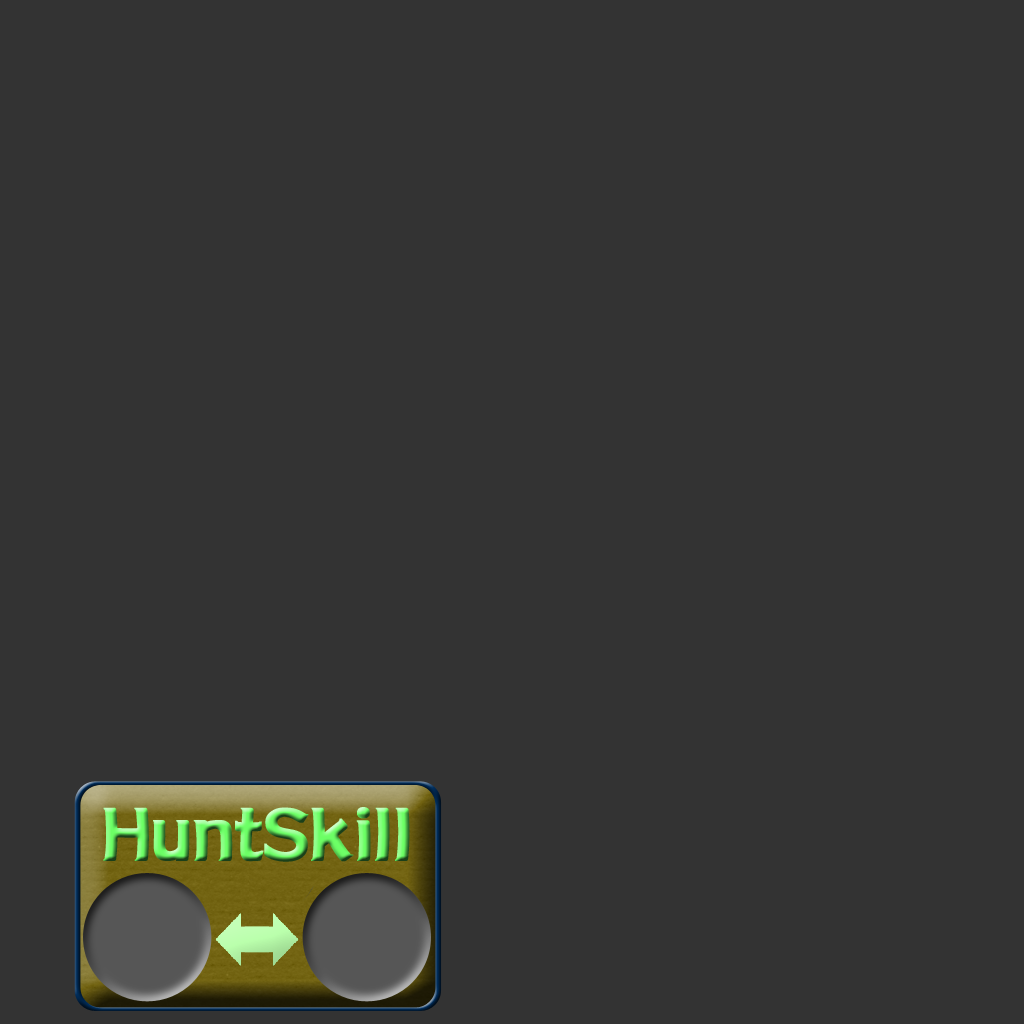
<style>
.page{position:relative;width:1024px;height:1024px;background:#333333}
.page>*{position:absolute;margin:0}
.t1{font:68.7px "DFPOP2-W9-WING-RKSJ-H";font-weight:bold}
</style>
<div class="page">
<p class="t1" style="left:103px;top:807px;width:307px;height:55px">HuntSkill</p>
</div>
